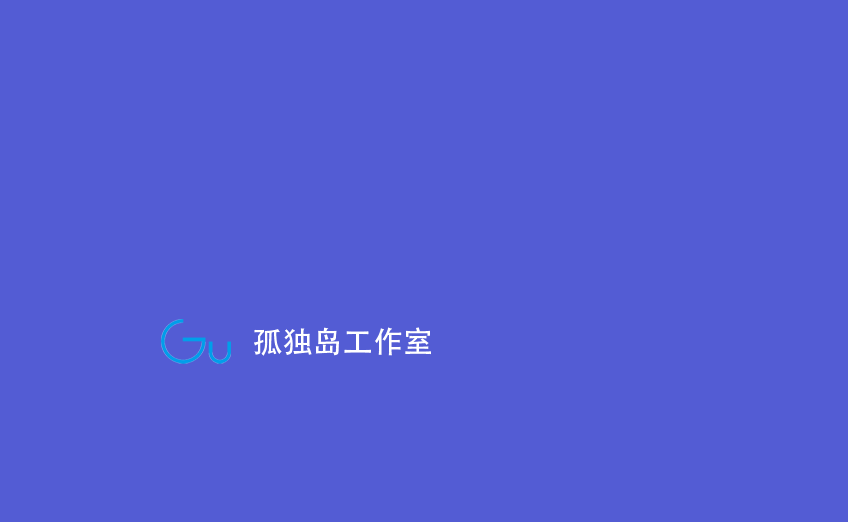
<style>
.page{position:relative;width:848px;height:522px;background:#535cd4}
.page>*{position:absolute;margin:0}
.t1{font:30px "AdobeHeitiStd-Regular";color:#ffffff}
</style>
<div class="page">
<p class="t1" style="left:254px;top:327px;width:177px;height:29px">孤独岛工作室</p>
</div>
